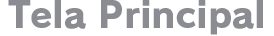
<style>
.page{position:relative;width:274px;height:36px;background:#ffffff}
.page>*{position:absolute;margin:0}
.t1{font:36px "RodinPro-EB";color:#8b8c92}
</style>
<div class="page">
<p class="t1" style="left:8px;top:0px;width:255px;height:35px">Tela Principal</p>
</div>
